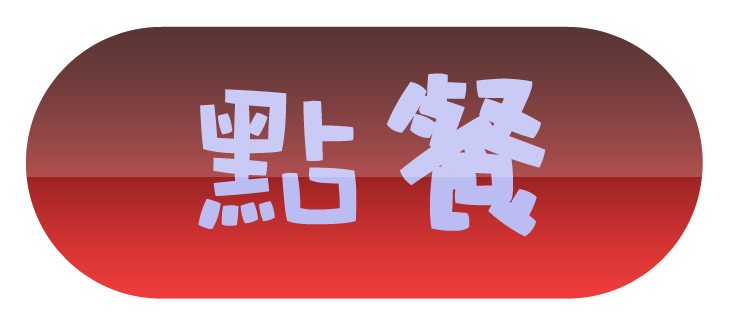
<style>
.page{position:relative;width:750px;height:330px;background:#ffffff}
.page>*{position:absolute;margin:0}
.t1{font:187.5px "DFWaWa-W7-WIN-BF";color:#bbbdf2;font-weight:bold}
</style>
<div class="page">
<p class="t1" style="left:198px;top:73px;width:348px;height:164px">點餐</p>
</div>
